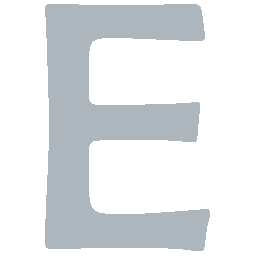
<style>
.page{position:relative;width:256px;height:256px;background:#ffffff}
.page>*{position:absolute;margin:0}
.t1{font:357.1px "BerlinSansFB-Reg";color:#adb5bd}
</style>
<div class="page">
<p class="t1" style="left:45px;top:4px;width:165px;height:247px">E</p>
</div>
